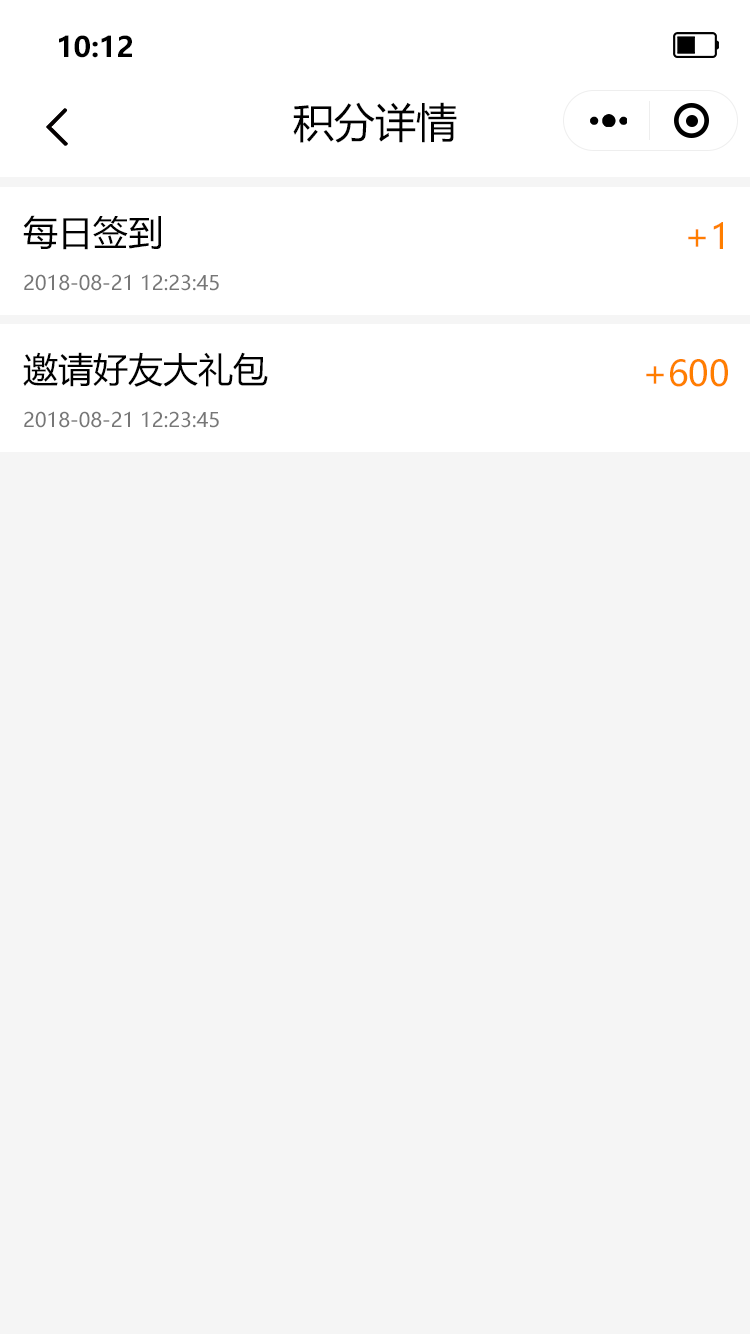
<style>
.page{position:relative;width:750px;height:1334px;background:#f5f5f5}
.page>*{position:absolute;margin:0}
.t1{font:28.1px "MicrosoftYaHei-Bold";color:#000000}
.t2{font:41px "MicrosoftYaHei";color:#000000}
.t3{font:35px "MicrosoftYaHei";color:#000000}
.t4{font:35px "MicrosoftYaHei";color:#ff7e00}
.t5{font:20px "MicrosoftYaHei";color:#777777}
</style>
<div class="page">
<p class="t1" style="left:59px;top:35px;width:73px;height:23px">10:12</p>
<p class="t2" style="left:293px;top:102px;width:164px;height:41px">积分详情</p>
<p class="t3" style="left:23px;top:215px;width:138px;height:35px">每日签到</p>
<p class="t4" style="left:688px;top:222px;width:35px;height:27px">+1</p>
<p class="t5" style="left:24px;top:274px;width:195px;height:17px">2018-08-21 12:23:45</p>
<p class="t3" style="left:23px;top:352px;width:245px;height:35px">邀请好友大礼包</p>
<p class="t4" style="left:646px;top:359px;width:82px;height:28px">+600</p>
<p class="t5" style="left:24px;top:411px;width:195px;height:17px">2018-08-21 12:23:45</p>
</div>
